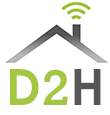
<style>
.page{position:relative;width:110px;height:115px;background:#ffffff}
.page>*{position:absolute;margin:0}
.t1{font:50px "LevenimMT-Bold";color:#a5c640}
.t2{font:50px "LevenimMT-Bold";color:#565658}
</style>
<div class="page">
<p class="t1" style="left:10px;top:69px;width:91px;height:36px">D2<span class="t2">H</span></p>
</div>
